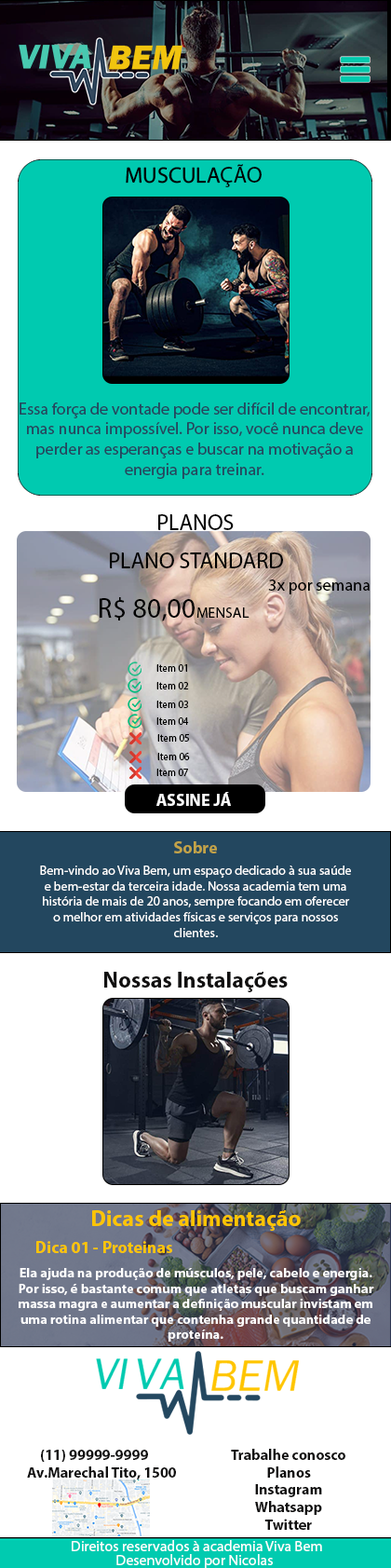
<style>
.page{position:relative;width:391px;height:1568px;background:#ffffff}
.page>*{position:absolute;margin:0}
.t1{font:22.4px "MyriadConceptRoman-Regular";color:#000000}
.t2{font:22.4px "MyriadPro-Regular";color:#000000}
.t3{font:16.8px "MyriadPro-Regular";color:#23475f}
.t4{font:16.8px "MyriadPro-Regular";color:#000000}
.t5{font:28px "MyriadPro-Regular";color:#000000}
.t6{font:14.9px "MyriadPro-Regular";color:#000000}
.t7{font:10.2px "MyriadPro-Regular";color:#000000}
.t8{font:16.8px "MyriadPro-Bold";color:#fdfdfd}
.t9{font:16.8px "MyriadPro-Bold";color:#c2a348}
.t10{font:13px "MyriadPro-Regular";color:#ffffff}
.t11{font:22.4px "MyriadPro-Bold";color:#111010}
.t12{font:22.4px "MyriadPro-Bold";color:#ffc500}
.t13{font:16.8px "MyriadPro-Bold";color:#ffc500}
.t14{font:12.8px "MyriadPro-Bold";color:#ffffff;scale:1.07 1}
.t15{font:14.9px "MyriadPro-Bold";color:#111010}
.t16{font:14.9px "MyriadPro-Regular";color:#ffffff}
</style>
<div class="page">
<p class="t1" style="left:126px;top:164px;width:136px;height:23px">MUSCULA<span class="t2">ÇÃO</span></p>
<p class="t3" style="left:20px;top:402px;width:350px;height:77px;text-align:center">Essa força de vontade pode ser difícil de encontrar, mas nunca impossível. Por isso, você nunca deve perder as esperanças e buscar na motivação a energia para treinar.</p>
<p class="t2" style="left:158px;top:514px;width:76px;height:16px">PLANOS</p>
<p class="t2" style="left:110px;top:552px;width:173px;height:16px">PLANO STANDARD</p>
<p class="t4" style="left:268px;top:579px;width:102px;height:15px">3x por semana</p>
<p class="t5" style="left:100px;top:597px;width:95px;height:24px">R$ 80,00</p>
<p class="t6" style="left:197px;top:607px;width:53px;height:11px">MENSAL</p>
<p class="t7" style="left:157px;top:664px;width:30px;height:8px">Item 01</p>
<p class="t7" style="left:157px;top:682px;width:32px;height:7px">Item 02</p>
<p class="t7" style="left:157px;top:701px;width:31px;height:7px">Item 03</p>
<p class="t7" style="left:157px;top:717px;width:32px;height:8px">Item 04</p>
<p class="t7" style="left:157px;top:734px;width:32px;height:8px">Item 05</p>
<p class="t7" style="left:157px;top:753px;width:33px;height:7px">Item 06</p>
<p class="t7" style="left:157px;top:769px;width:31px;height:7px">Item 07</p>
<p class="t8" style="left:157px;top:792px;width:74px;height:14px">ASSINE JÁ</p>
<p class="t9" style="left:174px;top:841px;width:43px;height:12px">Sobre</p>
<p class="t10" style="left:40px;top:866px;width:311px;height:71px;text-align:center">Bem-vindo ao Viva Bem, um espaço dedicado à sua saúde e bem-estar da terceira idade. Nossa academia tem uma história de mais de 20 anos, sempre focando em oferecer o melhor em atividades físicas e serviços para nossos clientes.</p>
<p class="t11" style="left:104px;top:972px;width:184px;height:20px">Nossas Instalações</p>
<p class="t12" style="left:92px;top:1210px;width:209px;height:21px">Dicas de alimentação</p>
<p class="t13" style="left:36px;top:1241px;width:136px;height:12px">Dica 01 - Proteinas</p>
<p class="t14" style="left:19px;top:1268px;width:356px;height:74px;text-align:center">Ela ajuda na produção de músculos, pele, cabelo e energia. Por isso, é bastante comum que atletas que buscam ganhar massa magra e aumentar a definição muscular invistam em uma rotina alimentar que contenha grande quantidade de proteína.</p>
<p class="t15" style="left:41px;top:1450px;width:107px;height:12px">(11) 99999-9999</p>
<p class="t15" style="left:231px;top:1449px;width:115px;height:11px">Trabalhe conosco</p>
<p class="t15" style="left:27px;top:1466px;width:149px;height:13px">Av.Marechal Tito, 1500</p>
<p class="t15" style="left:267px;top:1466px;width:44px;height:12px">Planos</p>
<p class="t15" style="left:255px;top:1484px;width:67px;height:46px;text-align:center">Instagram<br>Whatsapp<br>Twitter</p>
<p class="t16" style="left:72px;top:1540px;width:250px;height:11px">Direitos reservados à academia Viva Bem</p>
<p class="t16" style="left:116px;top:1554px;width:157px;height:14px">Desenvolvido por Nicolas</p>
</div>
